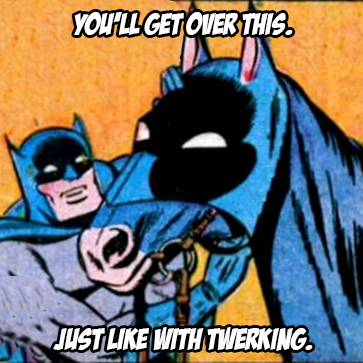
<style>
.page{position:relative;width:363px;height:363px}
.page>*{position:absolute;margin:0}
.t1{font:29.8px "BadaBoomBB";color:#ffffff}
</style>
<div class="page">
<p class="t1" style="left:74px;top:12px;width:219px;height:23px">YOU’LL GET OVER THIS.</p>
<p class="t1" style="left:53px;top:327px;width:260px;height:24px">just like with twerking.</p>
</div>
